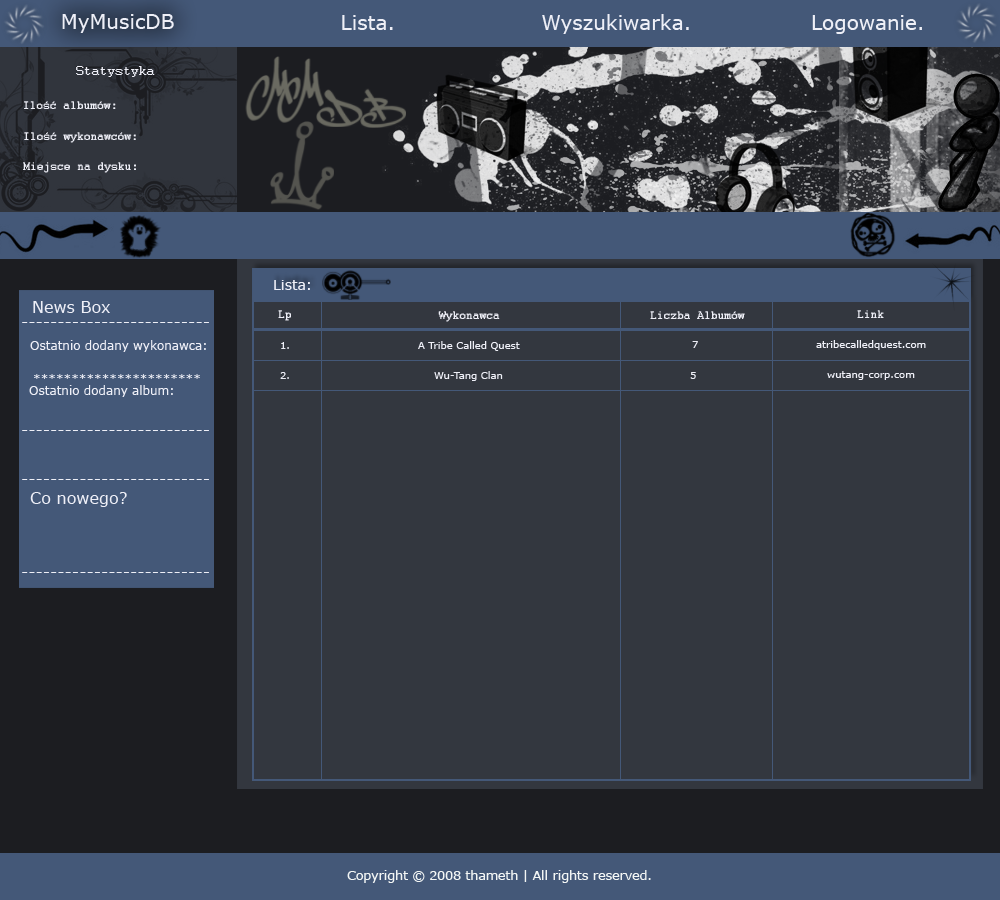
<style>
.page{position:relative;width:1000px;height:900px;background:#33373f}
.page>*{position:absolute;margin:0}
.t1{font:20px "Verdana";color:#eeeff7}
.t2{font:14px "Courier";color:#eeeff7}
.t3{font:12px "Courier";color:#eeeff7}
.t4{font:14px "Verdana";color:#eeeff7}
.t5{font:16px "Verdana";color:#eeeff7}
.t6{font:12px "Verdana";color:#eeeff7}
.t7{font:10px "Verdana";color:#eeeff7}
.t8{font:12.5px "Verdana";color:#f3f6f5}
</style>
<div class="page">
<p class="t1" style="left:62px;top:14px;width:112px;height:19px">MyMusicDB</p>
<p class="t1" style="left:342px;top:15px;width:51px;height:15px">Lista.</p>
<p class="t1" style="left:542px;top:14px;width:147px;height:20px">Wyszukiwarka.</p>
<p class="t1" style="left:812px;top:15px;width:110px;height:19px">Logowanie.</p>
<p class="t2" style="left:76px;top:66px;width:79px;height:11px">Statystyka</p>
<p class="t3" style="left:24px;top:101px;width:92px;height:8px">Ilość albumów:</p>
<p class="t3" style="left:24px;top:132px;width:112px;height:11px">Ilość wykonawców:</p>
<p class="t3" style="left:23px;top:162px;width:113px;height:11px">Miejsce na dysku:</p>
<p class="t4" style="left:274px;top:280px;width:36px;height:10px">Lista:</p>
<p class="t5" style="left:33px;top:301px;width:77px;height:12px">News Box</p>
<p class="t3" style="left:278px;top:310px;width:13px;height:11px">Lp</p>
<p class="t3" style="left:438px;top:311px;width:62px;height:11px">Wykonawca</p>
<p class="t3" style="left:650px;top:311px;width:95px;height:8px">Liczba Albumów</p>
<p class="t3" style="left:857px;top:310px;width:27px;height:8px">Link</p>
<p class="t5" style="left:22px;top:322px;width:187px;height:1px">--------------------------</p>
<p class="t6" style="left:30px;top:340px;width:176px;height:12px">Ostatnio dodany wykonawca:</p>
<p class="t7" style="left:281px;top:342px;width:8px;height:7px">1.</p>
<p class="t7" style="left:418px;top:341px;width:102px;height:10px">A Tribe Called Quest</p>
<p class="t7" style="left:692px;top:341px;width:6px;height:7px">7</p>
<p class="t7" style="left:816px;top:340px;width:110px;height:10px">atribecalledquest.com</p>
<p class="t6" style="left:34px;top:374px;width:166px;height:5px">**********************</p>
<p class="t7" style="left:280px;top:372px;width:9px;height:7px">2.</p>
<p class="t7" style="left:434px;top:371px;width:69px;height:10px">Wu-Tang Clan</p>
<p class="t7" style="left:690px;top:372px;width:6px;height:7px">5</p>
<p class="t7" style="left:827px;top:371px;width:88px;height:9px">wutang-corp.com</p>
<p class="t6" style="left:29px;top:385px;width:144px;height:12px">Ostatnio dodany album:</p>
<p class="t5" style="left:22px;top:430px;width:187px;height:1px">--------------------------</p>
<p class="t5" style="left:22px;top:479px;width:187px;height:1px">--------------------------</p>
<p class="t5" style="left:30px;top:492px;width:97px;height:15px">Co nowego?</p>
<p class="t5" style="left:22px;top:572px;width:187px;height:1px">--------------------------</p>
<p class="t8" style="left:347px;top:870px;width:304px;height:13px">Copyright © 2008 thameth | All rights reserved.</p>
</div>
